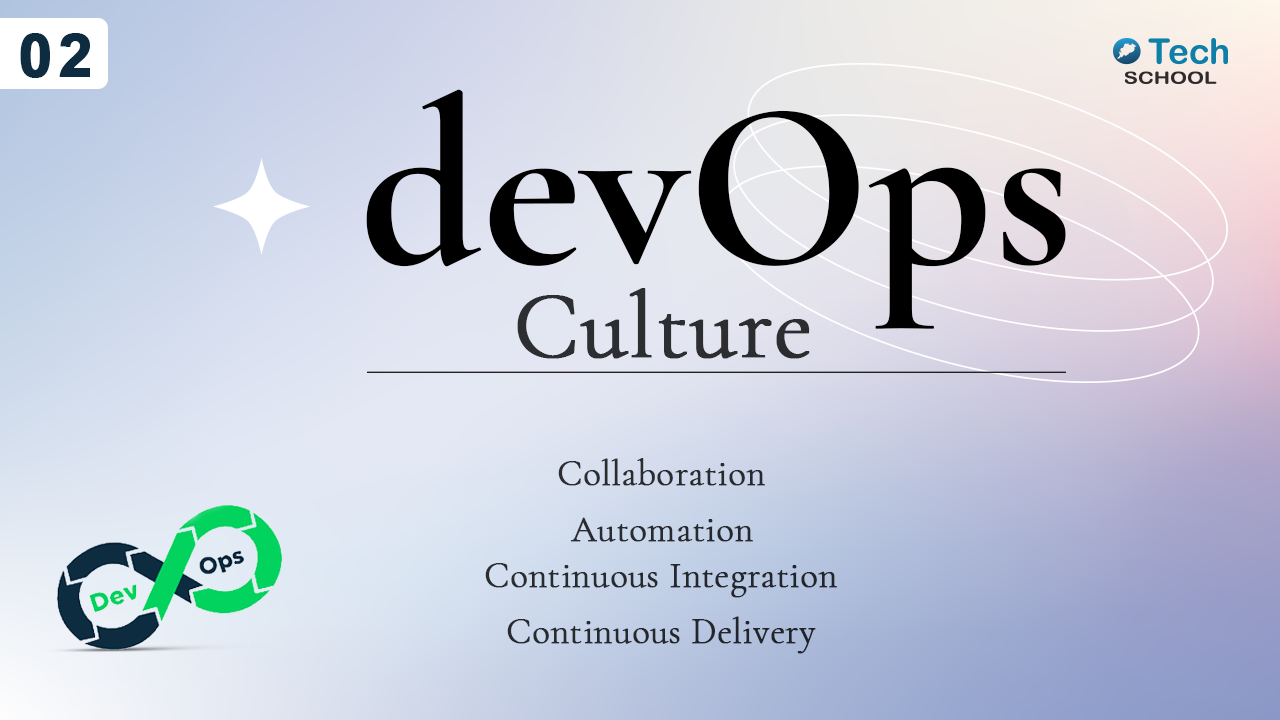
<style>
.page{position:relative;width:1280px;height:720px}
.page>*{position:absolute;margin:0}
.t1{font:60.3px "Arial-BoldMT";letter-spacing:0.08em;color:#0d2c40;font-weight:bold}
.t2{font:239.1px "CormorantGaramond-Bold";color:#000000}
.t3{font:93.8px "CormorantGaramond-Light";color:#2d2e31;font-weight:bold}
.t4{font:36px "CormorantGaramond-Light";color:#292b30;font-weight:bold}
.t5{font:36px "CormorantGaramond-Light";color:#272a2f;font-weight:bold}
.t6{font:36px "CormorantGaramond-Light";color:#25292e;font-weight:bold}
.t7{font:36px "CormorantGaramond-Light";color:#23272d;font-weight:bold}
</style>
<div class="page">
<p class="t1" style="left:20px;top:33px;width:70px;height:45px">02</p>
<p class="t2" style="left:366px;top:89px;width:700px;height:240px">devOps</p>
<p class="t3" style="left:517px;top:288px;width:293px;height:71px">Culture</p>
<p class="t4" style="left:558px;top:458px;width:207px;height:28px">Collaboration</p>
<p class="t5" style="left:570px;top:517px;width:183px;height:25px">Automation</p>
<p class="t6" style="left:485px;top:563px;width:352px;height:35px">Continuous Integration</p>
<p class="t7" style="left:507px;top:616px;width:309px;height:38px">Continuous Delivery</p>
</div>
